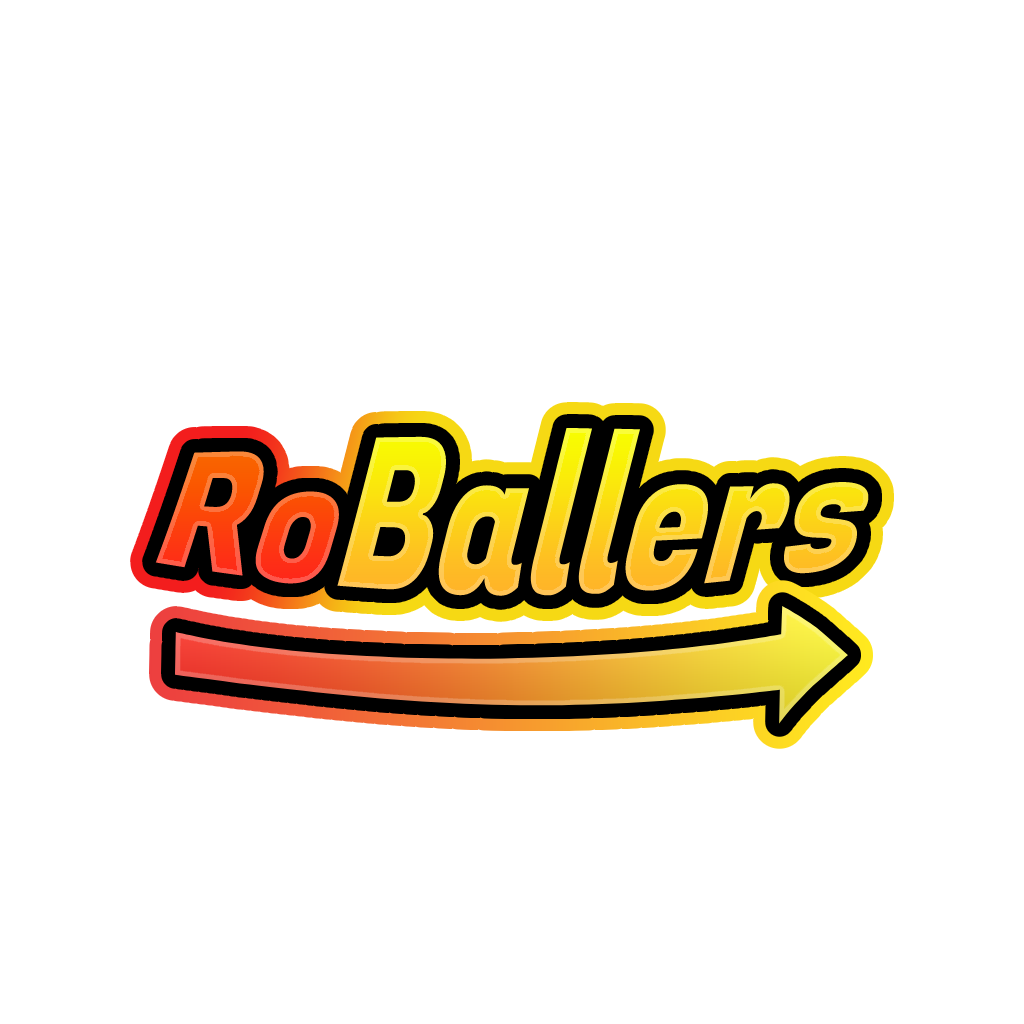
<style>
.page{position:relative;width:1024px;height:1024px;background:#ffffff}
.page>*{position:absolute;margin:0}
.t1{font:162px "FugazOne-Regular";font-style:italic;scale:0.93 1}
.t2{font:150px "FugazOne-Regular";font-style:italic}
</style>
<div class="page">
<p class="t1" style="left:155px;top:428px;width:715px;height:168px"><span class="t2">Ro</span>Ballers</p>
</div>
